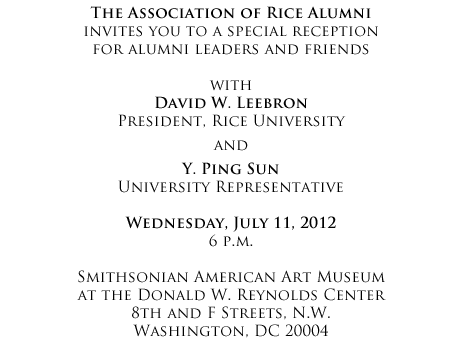
<style>
.page{position:relative;width:462px;height:343px;background:#ffffff}
.page>*{position:absolute;margin:0}
.t1{font:15px "TrajanPro-Regular";letter-spacing:0.01em;color:#000000}
.t2{font:15px "TrajanPro-Bold";letter-spacing:0.01em;color:#000000}
.t3{font:15px/24px "TrajanPro-Regular";letter-spacing:0.01em;color:#000000}
.t4{font:15px/24px "TrajanPro-Bold";letter-spacing:0.01em;color:#000000}
</style>
<div class="page">
<p class="t1" style="left:77px;top:6px;width:309px;height:332px;text-align:center"><span class="t2">The Association of Rice Alumni<br></span>invites you to a special reception <br>for alumni leaders and friends<br><br>with<br><span class="t2">David W. Leebron<br></span>President, Rice University<br><span class="t3">and<br></span><span class="t4">Y. Ping Sun<br></span>University Representative<br><br><span class="t2">Wednesday, July 11, 2012<br></span>6 p.m.<br><br>Smithsonian American Art Museum <br>at the Donald W. Reynolds Center<br>8th and F Streets, N.W.<br>Washington, DC 20004</p>
</div>
